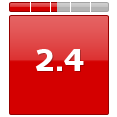
<style>
.page{position:relative;width:117px;height:117px;background:#d40000}
.page>*{position:absolute;margin:0}
.t1{font:36px "Colaborate-Bold";color:#ffffff;text-transform:uppercase}
</style>
<div class="page">
<p class="t1" style="left:35px;top:49px;width:49px;height:22px">2.4</p>
</div>
